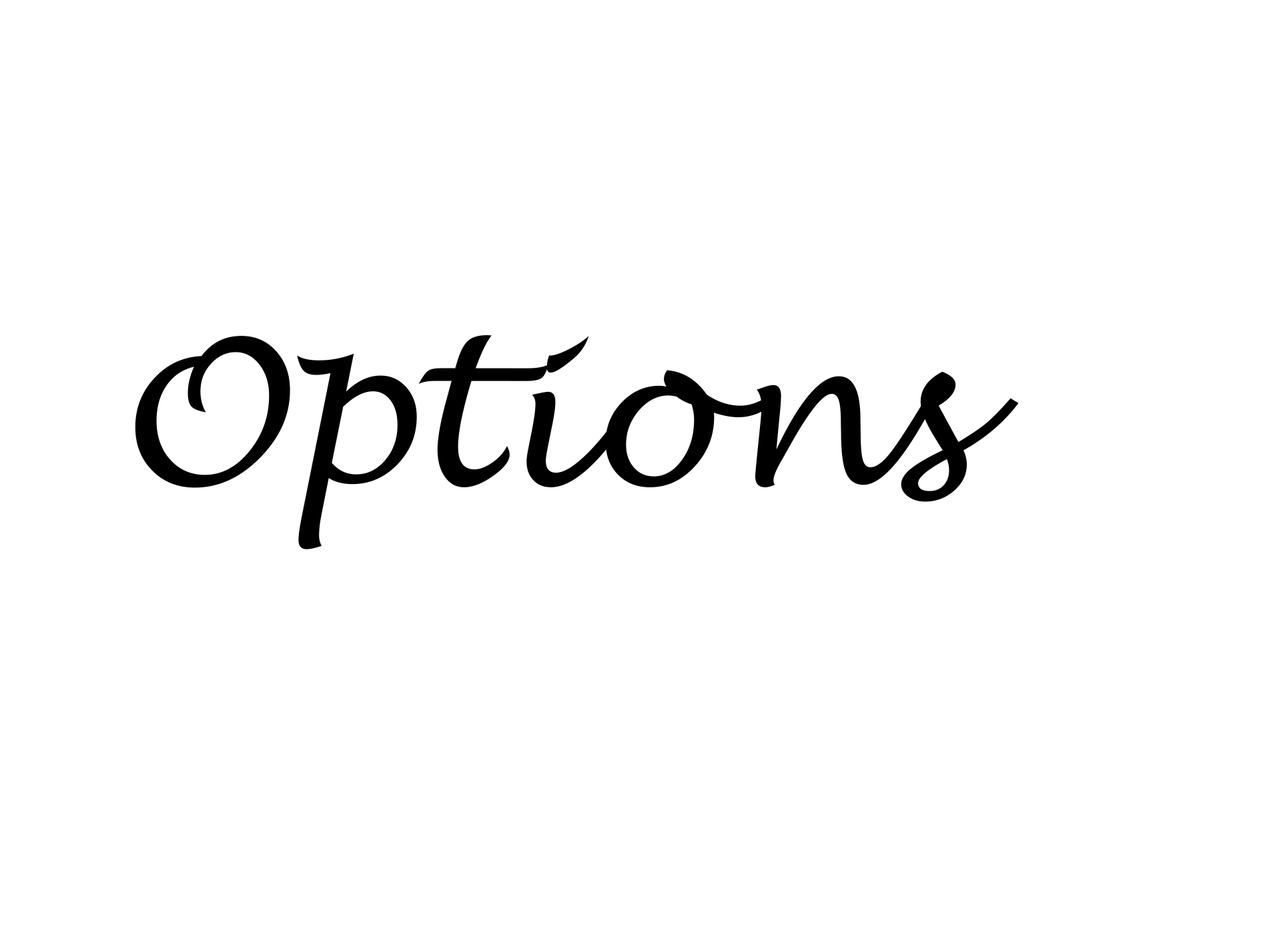
<style>
.page{position:relative;width:1261px;height:946px;background:#ffffff}
.page>*{position:absolute;margin:0}
.t1{font:200.2px "LucidaHandwriting-Italic";color:#000000}
</style>
<div class="page">
<p class="t1" style="left:135px;top:335px;width:884px;height:214px">Options</p>
</div>
